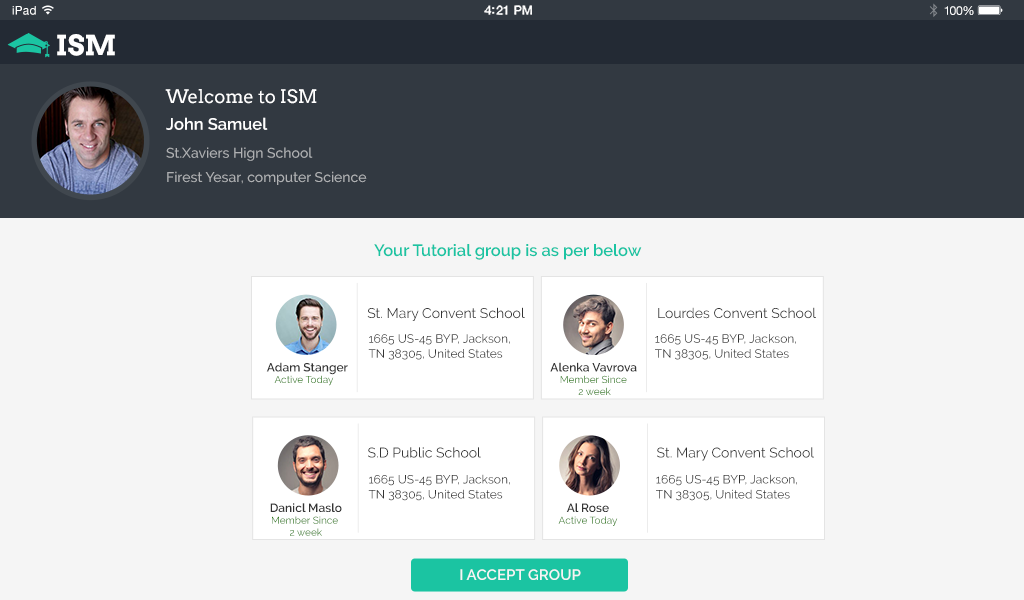
<style>
.page{position:relative;width:1024px;height:600px;background:#f5f5f5}
.page>*{position:absolute;margin:0}
.t1{font:12px "HelveticaNeue";letter-spacing:0.02em;color:#ffffff}
.t2{font:12.5px "HelveticaNeue-Medium";letter-spacing:-0.02em;color:#ffffff}
.t3{font:12px "HelveticaNeue";letter-spacing:-0.02em;color:#ffffff}
.t4{font:27.8px "Arvo-Bold";color:#ffffff}
.t5{font:18.5px "Arvo";color:#ffffff}
.t6{font:16.5px "Raleway-SemiBold";color:#ffffff}
.t7{font:14px/24.4px "Raleway-Medium";color:#afb0b2}
.t8{font:16.5px "Raleway-SemiBold";color:#1bc4a3}
.t9{font:14px "Raleway-Regular";color:#333333}
.t10{font:12px/15px "Raleway-Regular";color:#333333}
.t11{font:12px "Raleway-SemiBold";color:#333333}
.t12{font:10px "Raleway-Regular"}
.t13{font:10px "Raleway-Regular";color:#2d7a16}
.t14{font:15px "Raleway-SemiBold";color:#f5f5f5;text-transform:uppercase}
</style>
<div class="page">
<p class="t1" style="left:12px;top:6px;width:24px;height:9px">iPad</p>
<p class="t2" style="left:484px;top:5px;width:48px;height:10px">4:21 PM</p>
<p class="t3" style="left:944px;top:6px;width:30px;height:9px">100%</p>
<p class="t4" style="left:57px;top:34px;width:58px;height:22px">ISM</p>
<p class="t5" style="left:165px;top:89px;width:152px;height:15px">Welcome to ISM</p>
<p class="t6" style="left:166px;top:117px;width:102px;height:13px">John Samuel</p>
<p class="t7" style="left:166px;top:147px;width:201px;height:38px">St.Xaviers Hign School<br>Firest Yesar, computer Science</p>
<p class="t8" style="left:374px;top:244px;width:268px;height:16px">Your Tutorial group is as per below</p>
<p class="t9" style="left:367px;top:307px;width:158px;height:14px">St. Mary Convent School</p>
<p class="t9" style="left:658px;top:307px;width:158px;height:12px">Lourdes Convent School</p>
<p class="t10" style="left:368px;top:334px;width:142px;height:26px">1665 US-45 BYP, Jackson, <br>TN 38305, United States</p>
<p class="t10" style="left:655px;top:334px;width:141px;height:26px">1665 US-45 BYP, Jackson, <br>TN 38305, United States</p>
<p class="t11" style="left:266px;top:362px;width:82px;height:13px">Adam Stanger</p>
<p class="t11" style="left:550px;top:362px;width:87px;height:10px">Alenka Vavrova</p>
<p class="t12" style="left:274px;top:375px;width:60px;height:11px">Active Today</p>
<p class="t12" style="left:560px;top:375px;width:67px;height:20px;text-align:center">Member Since<br> 2 week</p>
<p class="t9" style="left:368px;top:447px;width:113px;height:11px">S.D Public School</p>
<p class="t9" style="left:657px;top:447px;width:157px;height:14px">St. Mary Convent School</p>
<p class="t10" style="left:368px;top:474px;width:142px;height:27px">1665 US-45 BYP, Jackson, <br>TN 38305, United States</p>
<p class="t10" style="left:656px;top:474px;width:141px;height:27px">1665 US-45 BYP, Jackson, <br>TN 38305, United States</p>
<p class="t11" style="left:270px;top:503px;width:72px;height:9px">Danicl Maslo</p>
<p class="t11" style="left:566px;top:503px;width:43px;height:9px">Al Rose</p>
<p class="t13" style="left:272px;top:516px;width:66px;height:20px;text-align:center">Member Since <br>2 week</p>
<p class="t12" style="left:558px;top:516px;width:60px;height:10px">Active Today</p>
<p class="t14" style="left:460px;top:569px;width:121px;height:11px">I accept group</p>
</div>
